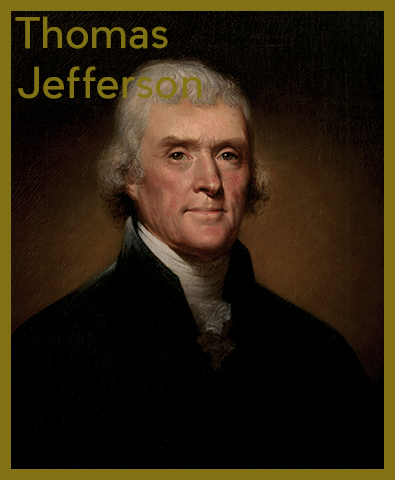
<style>
.page{position:relative;width:395px;height:480px;background:#000000}
.page>*{position:absolute;margin:0}
.t1{font:41.7px "PierSans";color:#807215}
</style>
<div class="page">
<p class="t1" style="left:15px;top:16px;width:187px;height:83px">Thomas<br>Jefferson</p>
</div>
